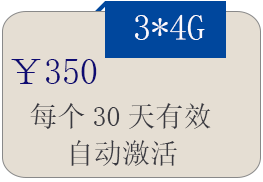
<style>
.page{position:relative;width:263px;height:182px;background:#e5ded3}
.page>*{position:absolute;margin:0}
.t1{font:36px "SimSun";color:#fafafe}
.t2{font:36px "SimSun";color:#0e0b72}
.t3{font:28px "NSimSun";color:#393940}
</style>
<div class="page">
<p class="t1" style="left:135px;top:14px;width:70px;height:26px">3*4G</p>
<p class="t2" style="left:11px;top:59px;width:86px;height:25px">￥350</p>
<p class="t3" style="left:30px;top:103px;width:181px;height:26px">每个30天有效</p>
<p class="t3" style="left:71px;top:140px;width:106px;height:26px">自动激活</p>
</div>
